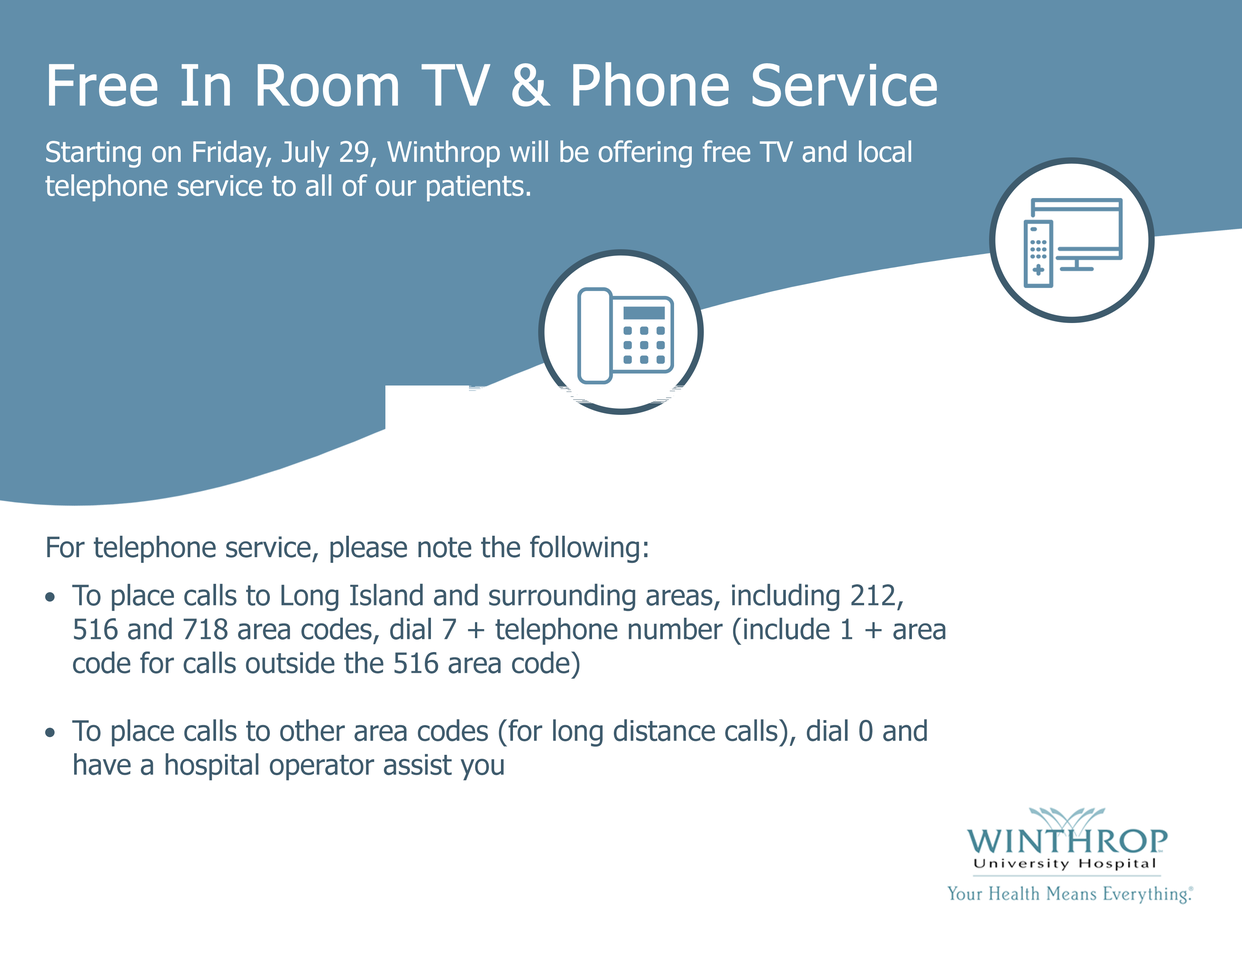
<style>
.page{position:relative;width:1242px;height:960px;background:#ffffff}
.page>*{position:absolute;margin:0}
.t1{font:28.2px "Tahoma";color:#3e5b6d}
</style>
<div class="page">
<p class="t1" style="left:47px;top:535px;width:601px;height:28px">For telephone service, please note the following:</p>
<p class="t1" style="left:72px;top:583px;width:874px;height:197px">To place calls to Long Island and surrounding areas, including 212, 516 and 718 area codes, dial 7 + telephone number (include 1 + area code for calls outside the 516 area code)<br><br>To place calls to other area codes (for long distance calls), dial 0 and have a hospital operator assist you</p>
</div>
